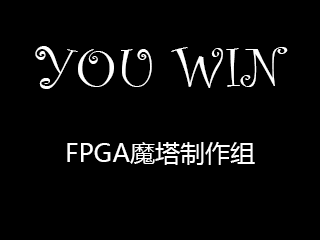
<style>
.page{position:relative;width:320px;height:240px;background:#000000}
.page>*{position:absolute;margin:0}
.t1{font:25px "MicrosoftYaHei";color:#ffffff}
.t2{font:58.3px "CurlzMT";color:#ffffff}
</style>
<div class="page">
<p class="t1" style="left:35px;top:46px;width:253px;height:119px;text-align:center"><span class="t2">YOU WIN<br></span>FPGA魔塔制作组</p>
</div>
